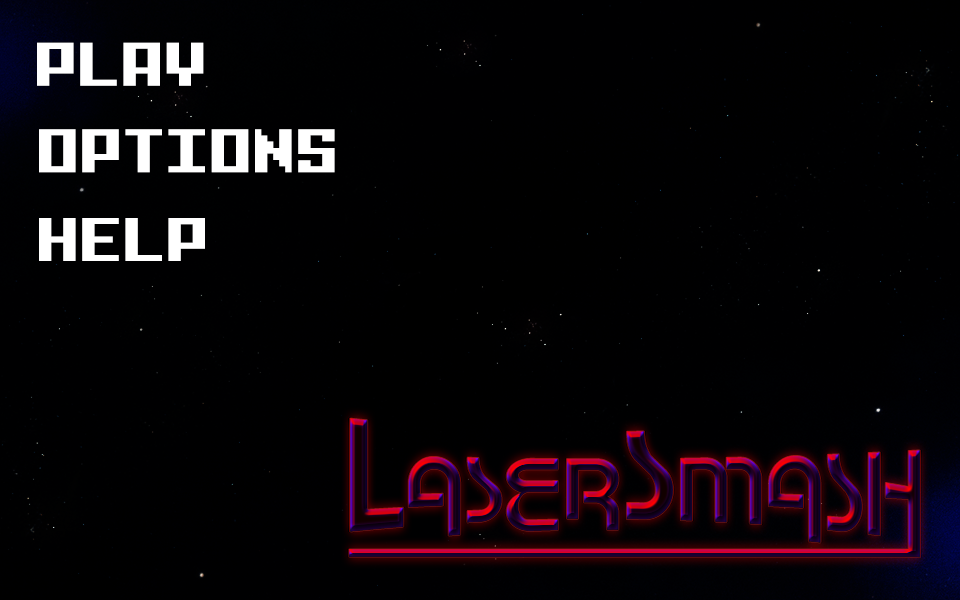
<style>
.page{position:relative;width:960px;height:600px;background:#000001}
.page>*{position:absolute;margin:0}
.t1{font:53.6px "Intellect";letter-spacing:-0.1em;color:#ffffff;text-transform:uppercase}
</style>
<div class="page">
<p class="t1" style="left:37px;top:42px;width:167px;height:44px">PLAY</p>
<p class="t1" style="left:39px;top:129px;width:296px;height:44px">OPTIONS</p>
<p class="t1" style="left:39px;top:218px;width:166px;height:43px">HELP</p>
</div>
